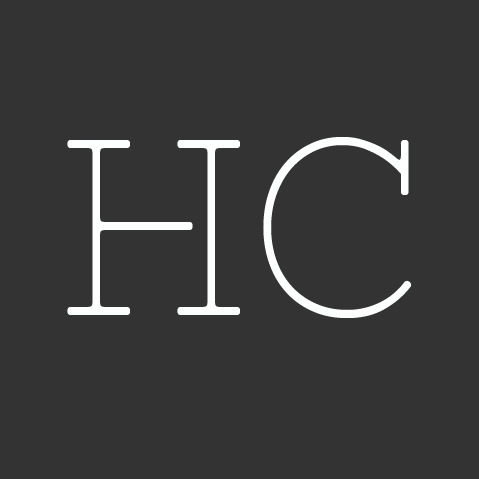
<style>
.page{position:relative;width:479px;height:479px;background:#333333}
.page>*{position:absolute;margin:0}
.t1{font:250px "NixieOne";color:#feffff}
</style>
<div class="page">
<p class="t1" style="left:67px;top:137px;width:345px;height:181px">HC</p>
</div>
